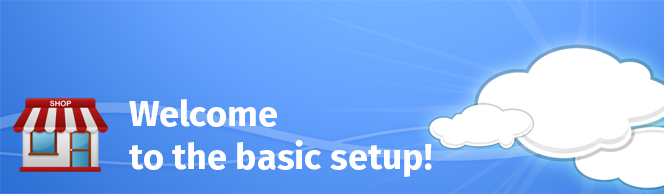
<style>
.page{position:relative;width:664px;height:194px}
.page>*{position:absolute;margin:0}
.t1{font:36px "FiraSansOT-Bold";color:#ffffff}
</style>
<div class="page">
<p class="t1" style="left:129px;top:99px;width:303px;height:78px">Welcome<br>to the basic setup!</p>
</div>
